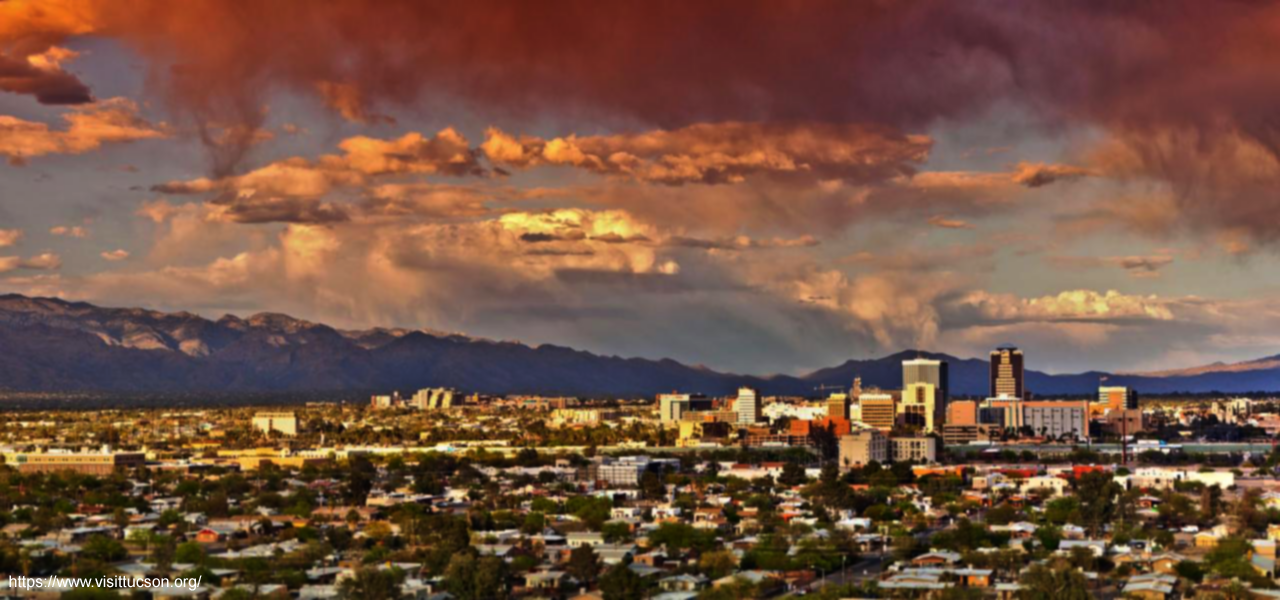
<style>
.page{position:relative;width:1280px;height:600px}
.page>*{position:absolute;margin:0}
.t1{font:16px "ArialMT";color:#ffffff}
</style>
<div class="page">
<p class="t1" style="left:9px;top:575px;width:193px;height:16px">https://www.visittucson.org/</p>
</div>
